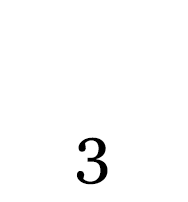
<style>
.page{position:relative;width:188px;height:202px;background:#ffffff}
.page>*{position:absolute;margin:0}
.t1{font:64.7px "Georgia";color:#000000}
</style>
<div class="page">
<p class="t1" style="left:76px;top:137px;width:32px;height:48px">3</p>
</div>
